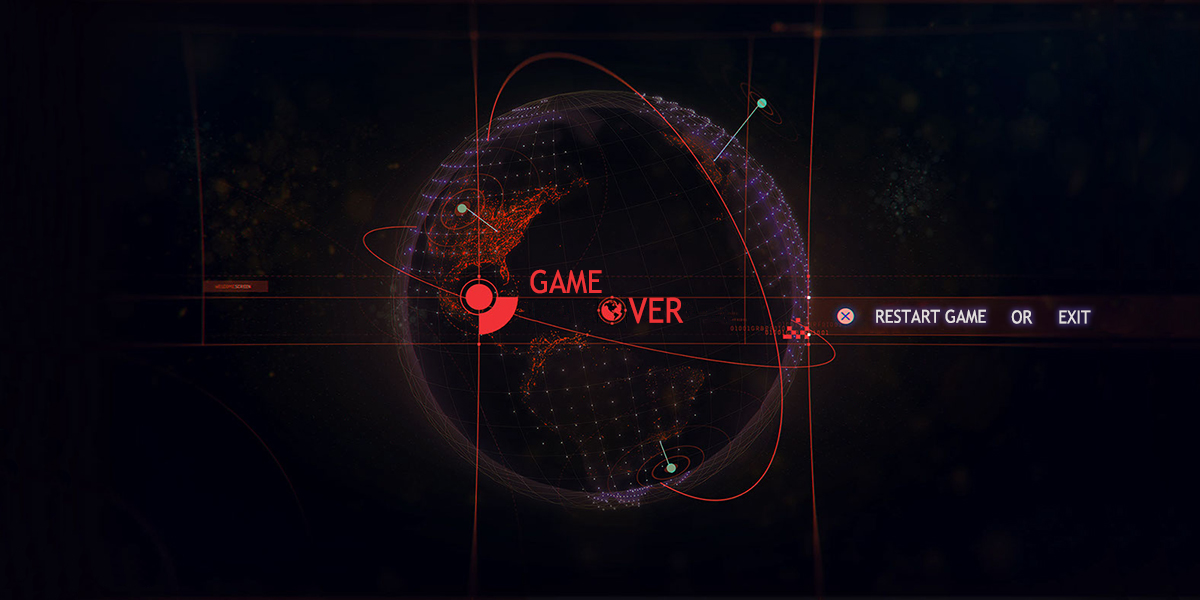
<style>
.page{position:relative;width:1200px;height:600px}
.page>*{position:absolute;margin:0}
.t1{font:31.5px "TrebuchetMS";color:#ed3235;scale:0.92 1}
.t2{font:34.7px "TrebuchetMS";color:#ed3235;scale:0.92 1}
.t3{font:17.9px "TrebuchetMS";color:#e3dede;scale:0.92 1}
</style>
<div class="page">
<p class="t1" style="left:530px;top:269px;width:72px;height:25px">GAME</p>
<p class="t2" style="left:628px;top:297px;width:56px;height:27px">VER</p>
<p class="t3" style="left:876px;top:309px;width:110px;height:14px">RESTART GAME</p>
<p class="t3" style="left:1011px;top:310px;width:22px;height:14px">OR</p>
<p class="t3" style="left:1059px;top:310px;width:32px;height:14px">EXIT</p>
</div>
